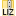
<style>
.page{position:relative;width:16px;height:16px;background:#ffffff}
.page>*{position:absolute;margin:0}
.t1{font:10px "Calibri";color:#1f1d19}
</style>
<div class="page">
<p class="t1" style="left:2px;top:9px;width:12px;height:6px">LIZ</p>
</div>
